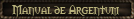
<style>
.page{position:relative;width:134px;height:19px}
.page>*{position:absolute;margin:0}
.t1{font:12px "Morpheus";color:#b9b27c}
</style>
<div class="page">
<p class="t1" style="left:12px;top:5px;width:107px;height:12px">Manual de Argentum</p>
</div>
